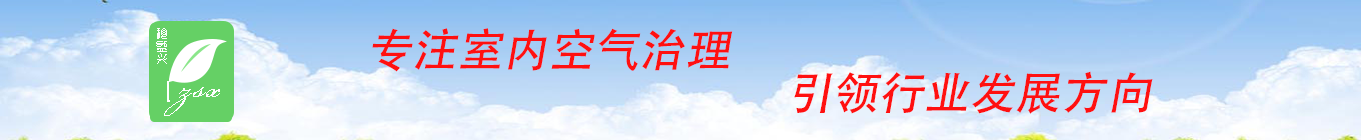
<style>
.page{position:relative;width:1361px;height:140px}
.page>*{position:absolute;margin:0}
.t1{font:45.5px "AdobeHeitiStd-Regular";color:#ff1010;font-style:italic}
</style>
<div class="page">
<p class="t1" style="left:372px;top:28px;width:361px;height:44px">专注室内空气治理</p>
<p class="t1" style="left:794px;top:71px;width:359px;height:43px">引领行业发展方向</p>
</div>
